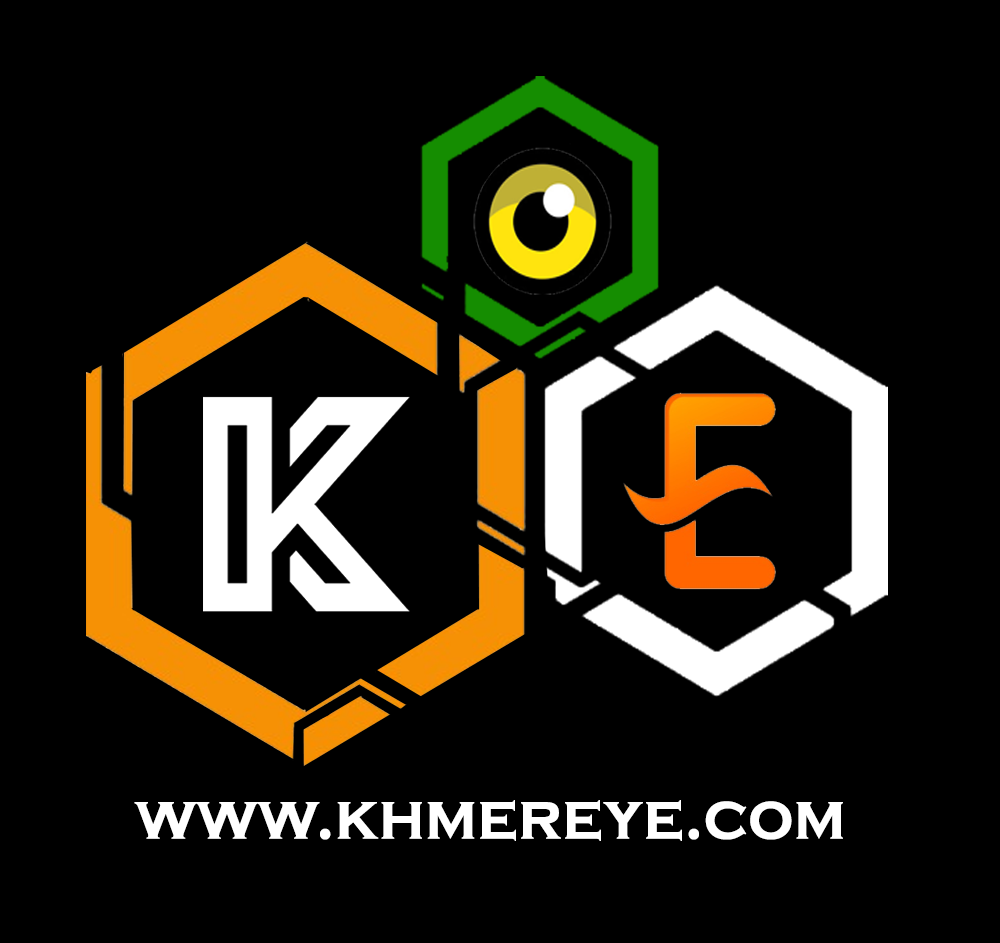
<style>
.page{position:relative;width:1000px;height:943px;background:#000000}
.page>*{position:absolute;margin:0}
.t1{font:66.8px "CopperplateGothic-Bold";color:#ffffff;scale:0.95 1}
</style>
<div class="page">
<p class="t1" style="left:134px;top:800px;width:709px;height:41px">www.khmereye.com</p>
</div>
